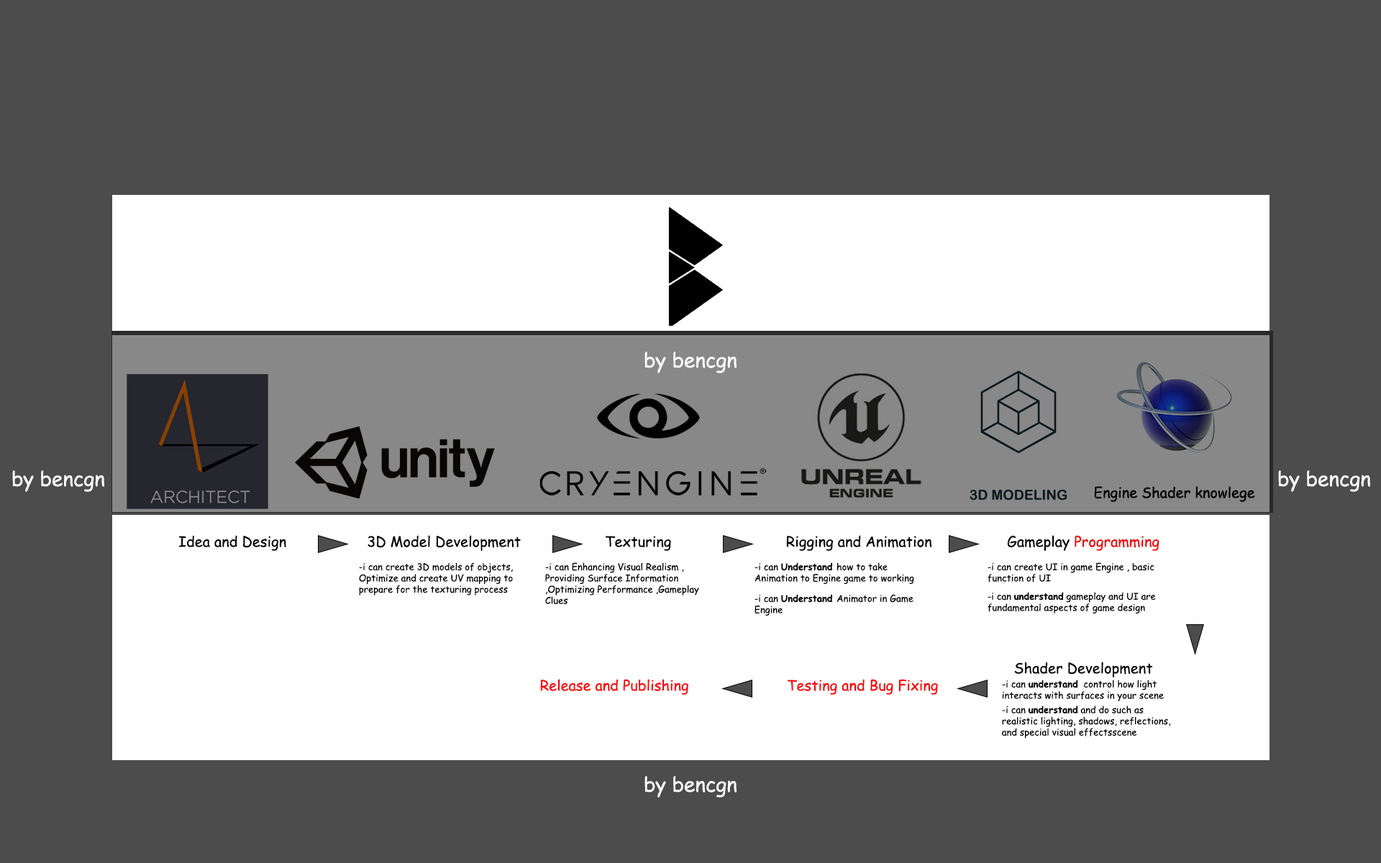
<style>
.page{position:relative;width:1381px;height:863px;background:#4c4c4c}
.page>*{position:absolute;margin:0}
.t1{font:20.1px "ComicSansMS";color:#ffffff}
.t2{font:14.4px "ComicSansMS";color:#000000}
.t3{font:14.4px "ComicSansMS";color:#f40000}
.t4{font:9.4px "ComicSansMS";color:#000000}
.t5{font:9.4px "ComicSansMS-Bold";color:#000000}
.t6{font:14.4px "ComicSansMS";color:#ff0000}
.t7{font:14.4px "ComicSansMS";color:#fe0000}
</style>
<div class="page">
<p class="t1" style="left:645px;top:352px;width:92px;height:21px">by bencgn</p>
<p class="t1" style="left:12px;top:470px;width:92px;height:22px">by bencgn</p>
<p class="t1" style="left:1278px;top:470px;width:92px;height:22px">by bencgn</p>
<p class="t2" style="left:178px;top:535px;width:108px;height:16px">Idea and Design</p>
<p class="t2" style="left:368px;top:535px;width:153px;height:16px">3D Model Development</p>
<p class="t2" style="left:606px;top:536px;width:65px;height:15px">Texturing</p>
<p class="t2" style="left:786px;top:535px;width:146px;height:16px">Rigging and Animation</p>
<p class="t3" style="left:1007px;top:535px;width:153px;height:16px"><span class="t2">Gameplay </span>Programming</p>
<p class="t4" style="left:359px;top:563px;width:154px;height:33px">-i can create 3D models of objects, Optimize and create UV mapping to prepare for the texturing process</p>
<p class="t4" style="left:545px;top:563px;width:154px;height:42px">-i can Enhancing Visual Realism , Providing Surface Information ,Optimizing Performance ,Gameplay Clues</p>
<p class="t4" style="left:755px;top:563px;width:159px;height:21px">-i can <span class="t5">Understand </span>how to take Animation to Engine game to working</p>
<p class="t4" style="left:988px;top:563px;width:167px;height:20px">-i can create UI in game Engine , basic function of UI</p>
<p class="t4" style="left:988px;top:592px;width:168px;height:22px">-i can <span class="t5">understand</span> gameplay and UI are fundamental aspects of game design</p>
<p class="t4" style="left:755px;top:594px;width:159px;height:22px">-i can <span class="t5">Understand </span>Animator in Game Engine</p>
<p class="t2" style="left:1014px;top:662px;width:139px;height:16px">Shader Development</p>
<p class="t6" style="left:540px;top:679px;width:148px;height:16px">Release and Publishing</p>
<p class="t7" style="left:787px;top:679px;width:151px;height:16px">Testing and Bug Fixing</p>
<p class="t4" style="left:1002px;top:680px;width:162px;height:22px">-i can <span class="t5">understand</span>  control how light interacts with surfaces in your scene</p>
<p class="t4" style="left:1002px;top:706px;width:169px;height:33px">-i can <span class="t5">understand</span> and do such as realistic lighting, shadows, reflections, and special visual effectsscene</p>
<p class="t1" style="left:645px;top:776px;width:92px;height:22px">by bencgn</p>
</div>
